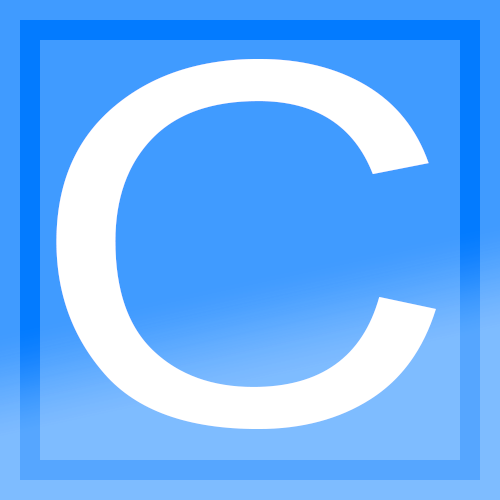
<style>
.page{position:relative;width:500px;height:500px;background:#409bff}
.page>*{position:absolute;margin:0}
.t1{font:500px "ArialUnicodeMS";color:#ffffff;scale:1.2 1}
</style>
<div class="page">
<p class="t1" style="left:56px;top:59px;width:380px;height:370px">C</p>
</div>
